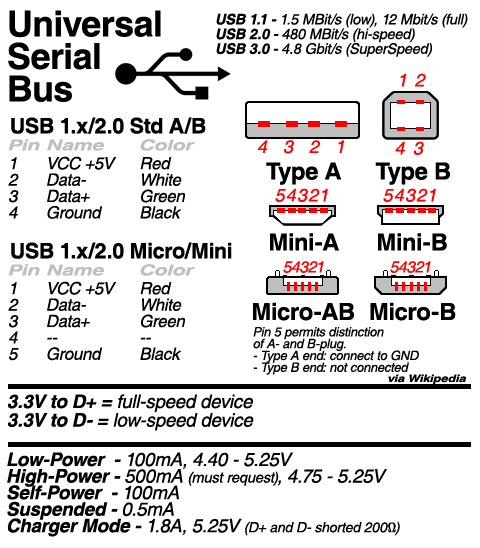
<style>
.page{position:relative;width:480px;height:548px;background:#ffffff}
.page>*{position:absolute;margin:0}
.t1{font:35.7px/32.5px "Helvetica-Bold";letter-spacing:-0.01em;color:#000000}
.t2{font:14.5px/14.7px "Helvetica-Oblique";letter-spacing:-0.01em;color:#000000}
.t3{font:14.5px/14.7px "Helvetica-BoldOblique";letter-spacing:-0.01em;color:#000000}
.t4{font:21.3px "Helvetica-Bold";letter-spacing:-0.01em;color:#000000}
.t5{font:15.1px "Helvetica-BoldOblique";letter-spacing:-0.01em;color:#bfbfbf;scale:1.41 1}
.t6{font:16.8px/16.4px "Helvetica-Oblique";letter-spacing:-0.01em;color:#000000}
.t7{font:12.8px/11.8px "Helvetica-Oblique";letter-spacing:-0.01em;color:#000000}
.t8{font:10.1px "Helvetica-BoldOblique";letter-spacing:-0.01em;color:#000000;scale:1.25 1}
.t9{font:18.7px/18.6px "Helvetica-Oblique";letter-spacing:-0.01em;color:#000000}
.t10{font:18.7px/18.6px "Helvetica-BoldOblique";letter-spacing:-0.01em;color:#000000}
.t11{font:14px/16.6px "Helvetica-Oblique";letter-spacing:-0.01em;color:#000000}
.t12{font:18.7px/16.6px "Helvetica-BoldOblique";letter-spacing:-0.01em;color:#000000}
.t13{font:18.7px/16.6px "Helvetica-Oblique";letter-spacing:-0.01em;color:#000000}
.t14{font:14.7px/16.6px "Helvetica-Oblique";letter-spacing:-0.01em;color:#000000}
</style>
<div class="page">
<p class="t1" style="left:8px;top:10px;width:153px;height:92px">Universal<br>Serial<br>Bus</p>
<p class="t2" style="left:216px;top:13px;width:252px;height:44px"><span class="t3">USB 1.1 - </span>1.5 MBit/s (low), 12 Mbit/s (full)<br><span class="t3">USB 2.0 - </span>480 MBit/s (hi-speed)<br><span class="t3">USB 3.0 - </span>4.8 Gbit/s (SuperSpeed)</p>
<p class="t4" style="left:11px;top:117px;width:195px;height:17px">USB 1.x/2.0 Std A/B</p>
<p class="t5" style="left:8px;top:139px;width:32px;height:12px">Pin</p>
<p class="t5" style="left:47px;top:139px;width:57px;height:12px">Name</p>
<p class="t5" style="left:140px;top:139px;width:55px;height:12px">Color</p>
<p class="t6" style="left:8px;top:157px;width:11px;height:62px">1<br>2<br>3<br>4</p>
<p class="t6" style="left:47px;top:156px;width:69px;height:63px">VCC +5V<br>Data-<br>Data+<br>Ground</p>
<p class="t6" style="left:140px;top:157px;width:45px;height:62px">Red<br>White<br>Green<br>Black</p>
<p class="t4" style="left:11px;top:242px;width:221px;height:17px">USB 1.x/2.0 Micro/Mini</p>
<p class="t5" style="left:8px;top:264px;width:32px;height:12px">Pin</p>
<p class="t5" style="left:47px;top:264px;width:57px;height:12px">Name</p>
<p class="t5" style="left:140px;top:264px;width:55px;height:12px">Color</p>
<p class="t6" style="left:47px;top:281px;width:69px;height:80px">VCC +5V<br>Data-<br>Data+<br>--<br>Ground</p>
<p class="t6" style="left:8px;top:282px;width:11px;height:79px">1<br>2<br>3<br>4<br>5</p>
<p class="t6" style="left:140px;top:282px;width:45px;height:78px">Red<br>White<br>Green<br>--<br>Black</p>
<p class="t7" style="left:253px;top:327px;width:166px;height:48px">Pin 5 permits distinction<br>of A- and B-plug.<br>- Type A end: connect to GND<br>- Type B end: not connected</p>
<p class="t8" style="left:388px;top:374px;width:78px;height:11px">via Wikipedia</p>
<p class="t9" style="left:8px;top:394px;width:246px;height:37px"><span class="t10">3.3V to D+ = </span>full-speed device<br><span class="t10">3.3V to D- =</span> low-speed device</p>
<p class="t11" style="left:7px;top:452px;width:393px;height:85px"><span class="t12">Low-Power  - </span><span class="t13">100mA, 4.40 - 5.25V<br></span><span class="t12">High-Power - </span><span class="t13">500mA </span><span class="t14">(must request)</span><span class="t13">, 4.75 - 5.25V<br></span><span class="t12">Self-Power  - </span><span class="t13">100mA<br></span><span class="t12">Suspended -</span><span class="t13"> 0.5mA<br></span><span class="t12">Charger Mode - </span><span class="t13">1.8A, 5.25V </span>(D+ and D- shorted 200Ω)</p>
</div>
